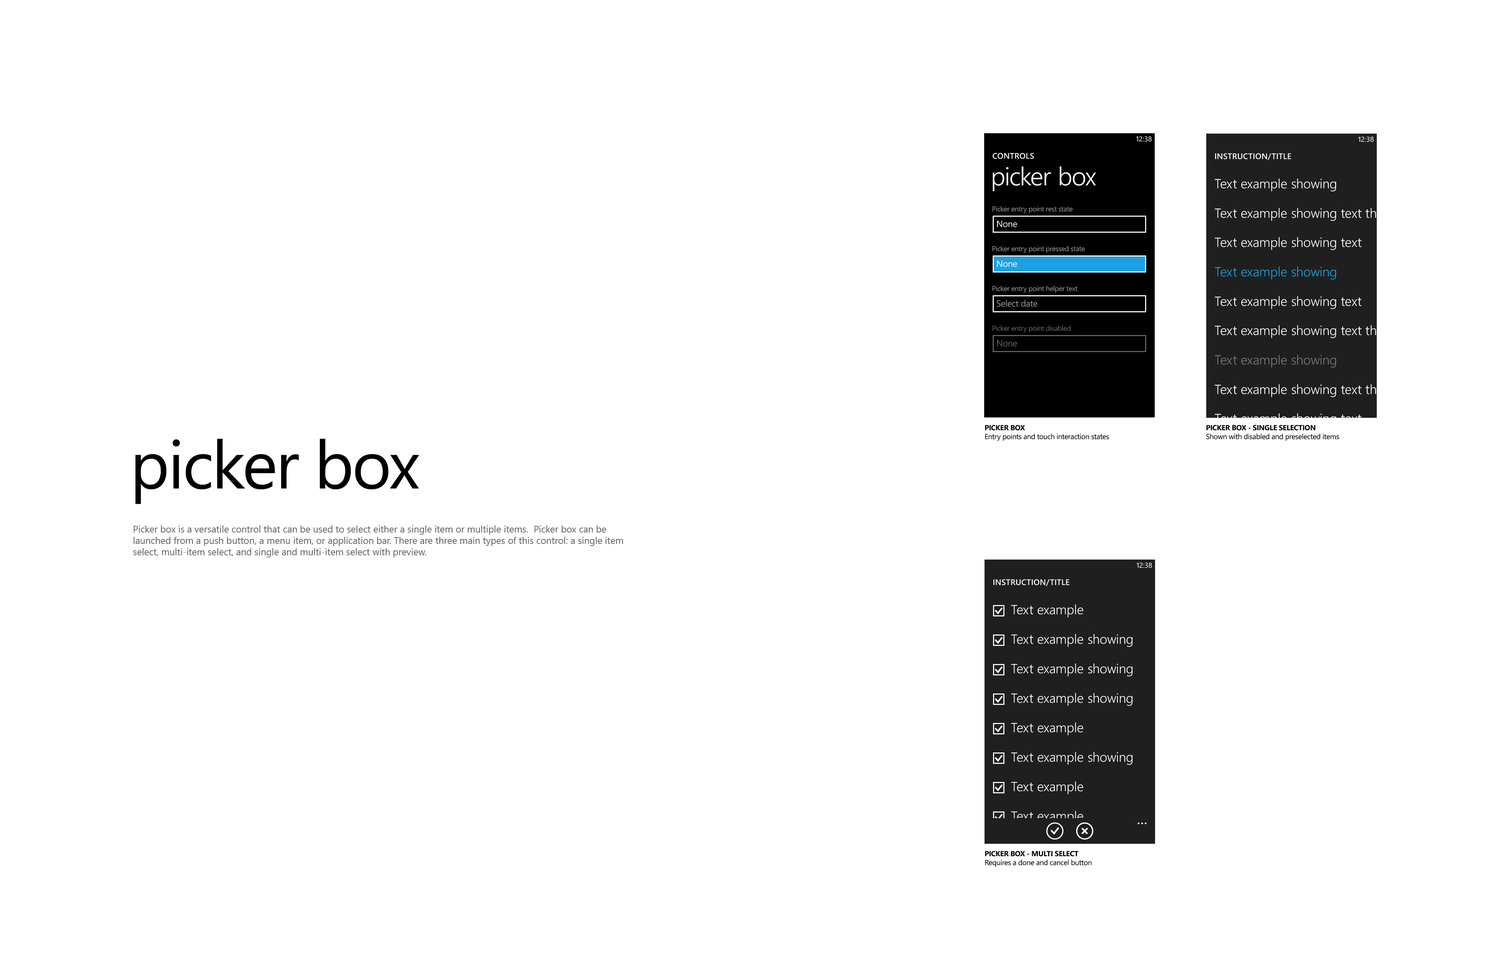
<style>
.page{position:relative;width:1510px;height:977px;background:#ffffff}
.page>*{position:absolute;margin:0}
.t1{font:7.1px "SegoeWP";color:#ffffff}
.t2{font:8.1px "SegoeWP-Semibold";letter-spacing:0.025em;color:#ffffff;text-transform:uppercase}
.t3{font:25.6px "SegoeWP-SemiLight";letter-spacing:-0.01em;color:#ffffff}
.t4{font:7.1px "SegoeWP";letter-spacing:-0.025em;color:#999999}
.t5{font:9px "SegoeWP";letter-spacing:-0.025em;color:#ffffff}
.t6{font:9px "SegoeWP";letter-spacing:-0.025em;color:#999999}
.t7{font:7.1px "SegoeWP";letter-spacing:-0.025em;color:#666666}
.t8{font:9px "SegoeWP";letter-spacing:-0.025em;color:#666666}
.t9{font:7.4px "SegoeWP";letter-spacing:-0.025em;color:#000000}
.t10{font:7.4px "SegoeWP-Bold";letter-spacing:-0.025em;color:#000000;text-transform:uppercase}
.t11{font:67.3px "SegoeWP";letter-spacing:-0.025em;color:#000000}
.t12{font:9.5px "SegoeUI";color:#666666}
.t13{font:13.3px "SegoeWP-SemiLight";color:#ffffff}
</style>
<div class="page">
<p class="t1" style="left:1136px;top:136px;width:16px;height:6px">12:38</p>
<p class="t1" style="left:1358px;top:136px;width:16px;height:6px">12:38</p>
<p class="t2" style="left:993px;top:153px;width:41px;height:6px">controls</p>
<p class="t2" style="left:1215px;top:153px;width:76px;height:7px">instruction/title</p>
<p class="t3" style="left:993px;top:166px;width:103px;height:25px">picker box</p>
<p class="t4" style="left:992px;top:206px;width:81px;height:7px">Picker entry point rest state</p>
<p class="t5" style="left:997px;top:221px;width:20px;height:6px">None</p>
<p class="t4" style="left:992px;top:246px;width:93px;height:7px">Picker entry point pressed state</p>
<p class="t5" style="left:997px;top:260px;width:20px;height:7px">None</p>
<p class="t4" style="left:992px;top:286px;width:86px;height:7px">Picker entry point helper text</p>
<p class="t6" style="left:997px;top:300px;width:40px;height:7px">Select date</p>
<p class="t7" style="left:992px;top:325px;width:78px;height:8px">Picker entry point disabled</p>
<p class="t8" style="left:997px;top:340px;width:20px;height:7px">None</p>
<p class="t9" style="left:985px;top:425px;width:124px;height:16px"><span class="t10">picker box<br></span>Entry points and touch interaction states</p>
<p class="t9" style="left:1206px;top:425px;width:133px;height:16px"><span class="t10">picker box - single selection<br></span>Shown with disabled and preselected items</p>
<p class="t11" style="left:135px;top:439px;width:284px;height:65px">picker box</p>
<p class="t12" style="left:133px;top:525px;width:490px;height:32px">Picker box is a versatile control that can be used to select either a single item or multiple items.  Picker box can be launched from a push button, a menu item, or application bar. There are three main types of this control: a single item select, multi-item select, and single and multi-item select with preview.</p>
<p class="t1" style="left:1136px;top:562px;width:16px;height:6px">12:38</p>
<p class="t2" style="left:993px;top:579px;width:76px;height:7px">instruction/title</p>
<p class="t13" style="left:1011px;top:604px;width:72px;height:13px">Text example</p>
<p class="t13" style="left:1011px;top:634px;width:122px;height:13px">Text example showing</p>
<p class="t13" style="left:1011px;top:663px;width:122px;height:13px">Text example showing</p>
<p class="t13" style="left:1011px;top:693px;width:122px;height:13px">Text example showing</p>
<p class="t13" style="left:1011px;top:722px;width:72px;height:13px">Text example</p>
<p class="t13" style="left:1011px;top:752px;width:122px;height:13px">Text example showing</p>
<p class="t13" style="left:1011px;top:781px;width:72px;height:13px">Text example</p>
<p class="t13" style="left:1011px;top:811px;width:72px;height:13px">Text example</p>
<p class="t9" style="left:985px;top:851px;width:107px;height:16px"><span class="t10">picker box - multi select<br></span>Requires a done and cancel button</p>
</div>
